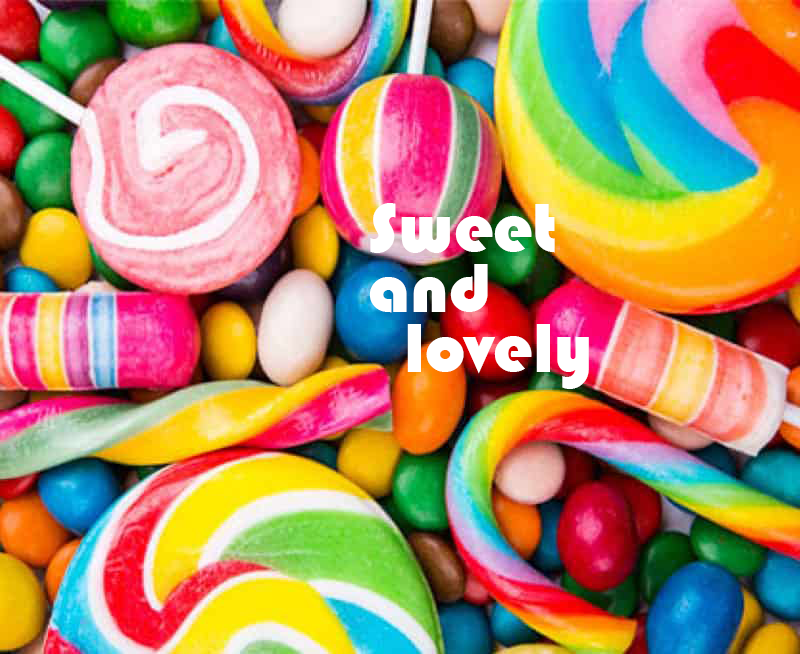
<style>
.page{position:relative;width:800px;height:654px}
.page>*{position:absolute;margin:0}
.t1{font:72px/30px "Bauhaus93";color:#ffffff}
</style>
<div class="page">
<p class="t1" style="left:369px;top:203px;width:220px;height:186px">Sweet <br><br>and<br> <br>  lovely</p>
</div>
